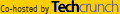
<style>
.page{position:relative;width:120px;height:14px;background:#fccd01}
.page>*{position:absolute;margin:0}
.t1{font:10px "AbadiMT-CondensedLight";letter-spacing:0.04em;color:#343434}
</style>
<div class="page">
<p class="t1" style="left:0px;top:5px;width:49px;height:9px">Co-hosted by</p>
</div>
